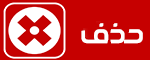
<style>
.page{position:relative;width:150px;height:60px;background:#c60000}
.page>*{position:absolute;margin:0}
.t1{font:36px "Israr-Syria";color:#ffffff}
</style>
<div class="page">
<p class="t1" style="left:81px;top:23px;width:62px;height:21px">حذف</p>
</div>
